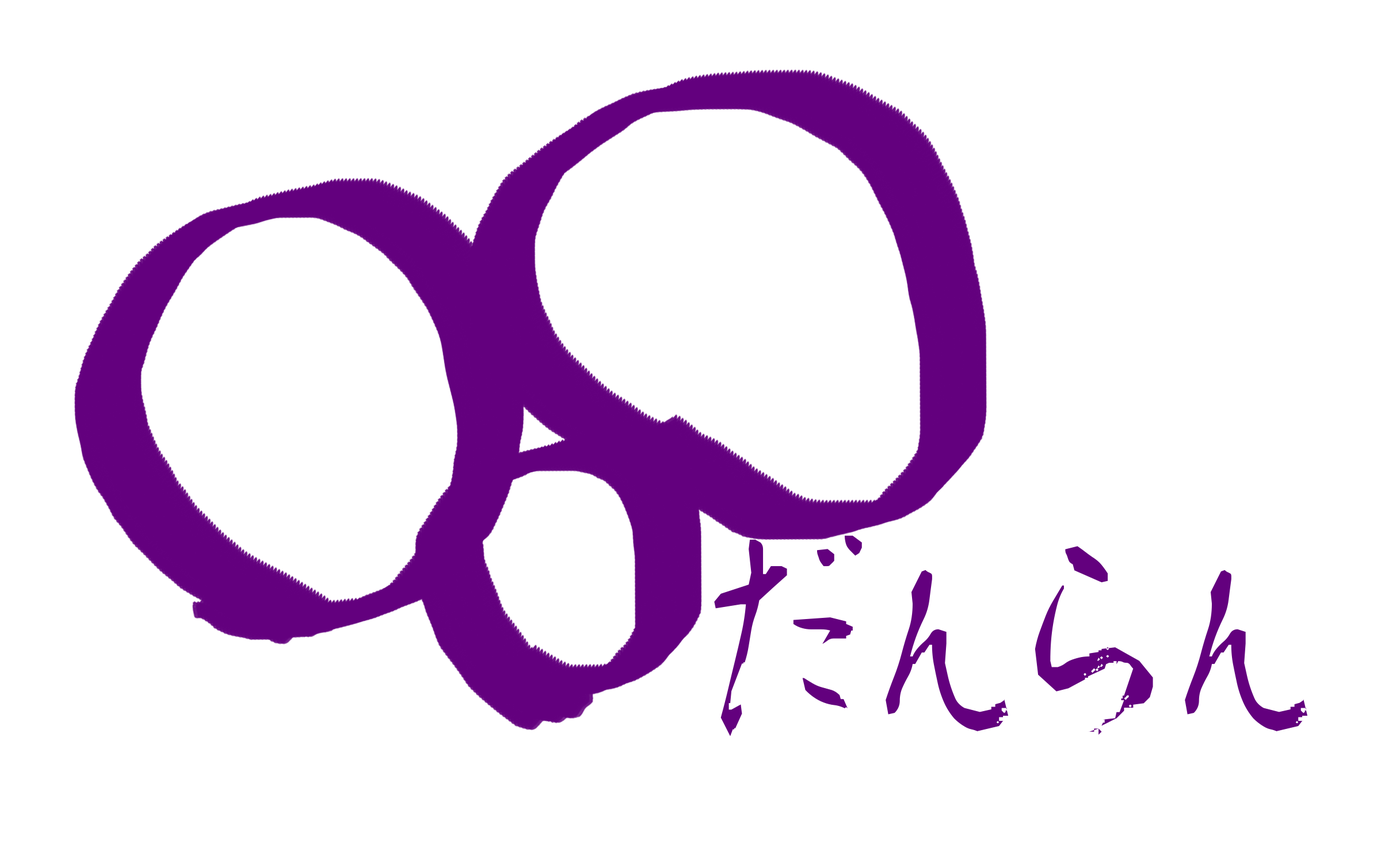
<style>
.page{position:relative;width:1381px;height:863px;background:#ffffff}
.page>*{position:absolute;margin:0}
.t1{font:239.8px "aoyagireisyosimo2";color:#63007e}
</style>
<div class="page">
<p class="t1" style="left:714px;top:536px;width:594px;height:201px">だんらん</p>
</div>
